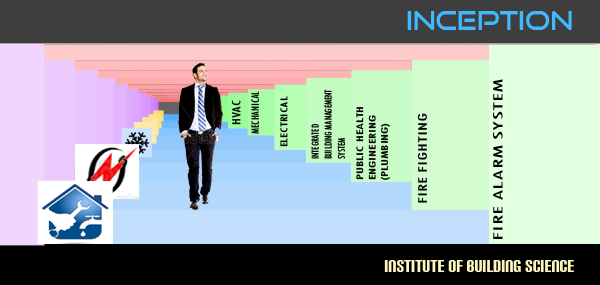
<style>
.page{position:relative;width:600px;height:285px}
.page>*{position:absolute;margin:0}
.t1{font:26px "GoodTimesRg-Regular";color:#41b9fe}
.t2{font:10.8px "TwCenMT-Condensed";color:#000000;scale:0.92 1}
.t3{font:14.8px "TwCenMT-Condensed";color:#000000;scale:1.88 1}
.t4{font:12.8px "TwCenMT-Condensed";color:#000000;scale:1.28 1}
.t5{font:11.4px "TwCenMT-Condensed";color:#000000}
.t6{font:11px "TwCenMT-Condensed";color:#000000;scale:1.38 1}
.t7{font:10.4px "TwCenMT-Condensed";color:#000000;scale:1.62 1}
.t8{font:13.5px "TwCenMT-Condensed";color:#000000;scale:1.62 1}
.t9{font:16px "CarbonBl-Regular";color:#fef6be}
</style>
<div class="page">
<p class="t1" style="left:407px;top:11px;width:165px;height:19px">inception</p>
<p class="t2" style="left:311px;top:89px;width:34px;height:70px;rotate:-90deg">INTEGRATED<br>BUILDING MANAGEMENT<br>SYSTEM</p>
<p class="t3" style="left:493px;top:79px;width:10px;height:160px;rotate:-90deg">FIRE ALARM SYSTEM</p>
<p class="t4" style="left:231px;top:100px;width:10px;height:25px;rotate:-90deg">HVAC</p>
<p class="t5" style="left:251px;top:91px;width:8px;height:43px;rotate:-90deg">MECHANICAL</p>
<p class="t6" style="left:280px;top:96px;width:8px;height:51px;rotate:-90deg">ELECTRICAL</p>
<p class="t7" style="left:356px;top:107px;width:34px;height:73px;rotate:-90deg">PUBLIC HEALTH ENGINEERING (PLUMBING)</p>
<p class="t8" style="left:417px;top:113px;width:10px;height:90px;rotate:-90deg">FIRE FIGHTING</p>
<p class="t9" style="left:384px;top:260px;width:190px;height:12px">institute of building science</p>
</div>
